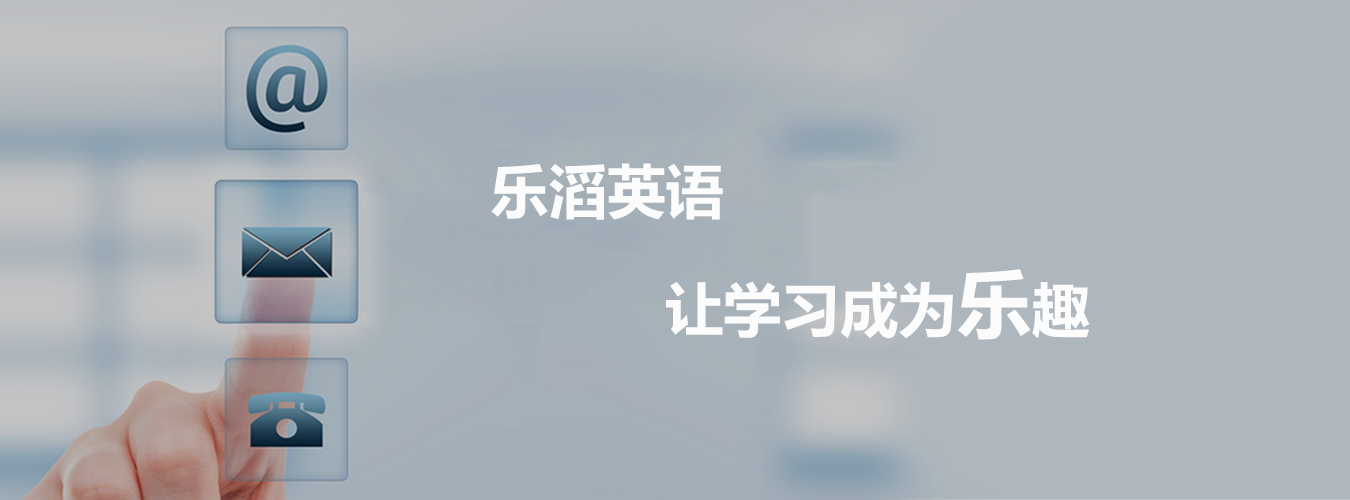
<style>
.page{position:relative;width:1350px;height:500px;background:#afb7be}
.page>*{position:absolute;margin:0}
.t1{font:58.3px "MicrosoftYaHei-Bold";color:#fcfcfc}
.t2{font:75px "MicrosoftYaHei-Bold";color:#fcfcfc}
</style>
<div class="page">
<p class="t1" style="left:491px;top:163px;width:232px;height:57px">乐滔英语</p>
<p class="t1" style="left:666px;top:269px;width:424px;height:71px">让学习成为<span class="t2">乐</span>趣</p>
</div>
